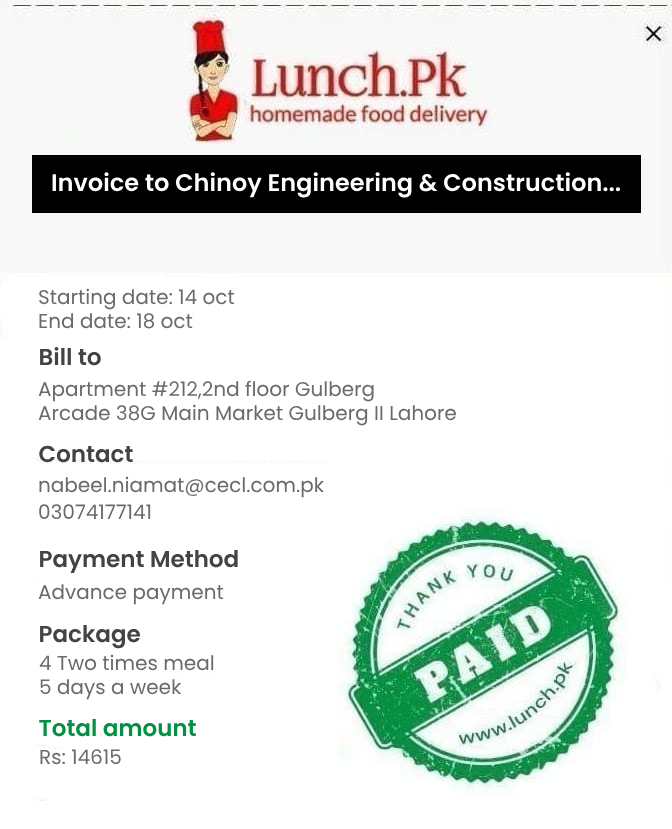
<style>
.page{position:relative;width:672px;height:829px;background:#ffffff}
.page>*{position:absolute;margin:0}
.t1{font:24px "Poppins-SemiBold";color:#ffffff}
.t2{font:20px "Poppins-Regular";color:#6a6a6a}
.t3{font:23px "Poppins-SemiBold";color:#434343}
.t4{font:23px "Poppins-SemiBold";color:#039042}
</style>
<div class="page">
<p class="t1" style="left:52px;top:172px;width:569px;height:26px">Invoice to Chinoy Engineering &amp; Construction...</p>
<p class="t2" style="left:39px;top:288px;width:196px;height:41px">Starting date: 14 oct<br>End date: 18 oct</p>
<p class="t3" style="left:40px;top:346px;width:61px;height:20px">Bill to</p>
<p class="t2" style="left:38px;top:380px;width:418px;height:46px">Apartment #212,2nd floor Gulberg <br>Arcade 38G Main Market Gulberg II Lahore</p>
<p class="t3" style="left:39px;top:445px;width:94px;height:18px">Contact</p>
<p class="t2" style="left:39px;top:476px;width:285px;height:22px">nabeel.niamat@cecl.com.pk</p>
<p class="t2" style="left:39px;top:504px;width:112px;height:16px">03074177141</p>
<p class="t3" style="left:40px;top:549px;width:198px;height:25px">Payment Method</p>
<p class="t2" style="left:38px;top:584px;width:186px;height:21px">Advance payment</p>
<p class="t3" style="left:40px;top:624px;width:100px;height:25px">Package</p>
<p class="t2" style="left:39px;top:654px;width:175px;height:46px">4 Two times meal<br>5 days a week</p>
<p class="t4" style="left:39px;top:718px;width:157px;height:19px">Total amount</p>
<p class="t2" style="left:40px;top:749px;width:81px;height:16px">Rs: 14615</p>
</div>
